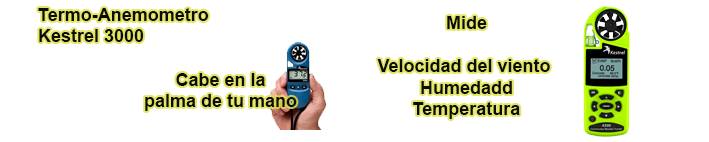
<style>
.page{position:relative;width:709px;height:142px;background:#ffffff}
.page>*{position:absolute;margin:0}
.t1{font:18px "Arial-BoldMT";color:#090a0a}
</style>
<div class="page">
<p class="t1" style="left:38px;top:8px;width:171px;height:34px">Termo-Anemometro<br>Kestrel 3000</p>
<p class="t1" style="left:377px;top:16px;width:173px;height:103px;text-align:center">Mide<br><br>Velocidad del viento <br>Humedadd<br>Temperatura</p>
<p class="t1" style="left:145px;top:73px;width:152px;height:38px;text-align:center">Cabe en la<br>palma de tu mano</p>
</div>
